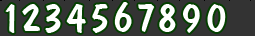
<style>
.page{position:relative;width:255px;height:36px;background:#333333}
.page>*{position:absolute;margin:0}
.t1{font:43.8px "DomCasualBT-Regular";letter-spacing:0.09em;color:#ffffff;font-variant:small-caps}
</style>
<div class="page">
<p class="t1" style="left:5px;top:2px;width:221px;height:31px">1234567890</p>
</div>
